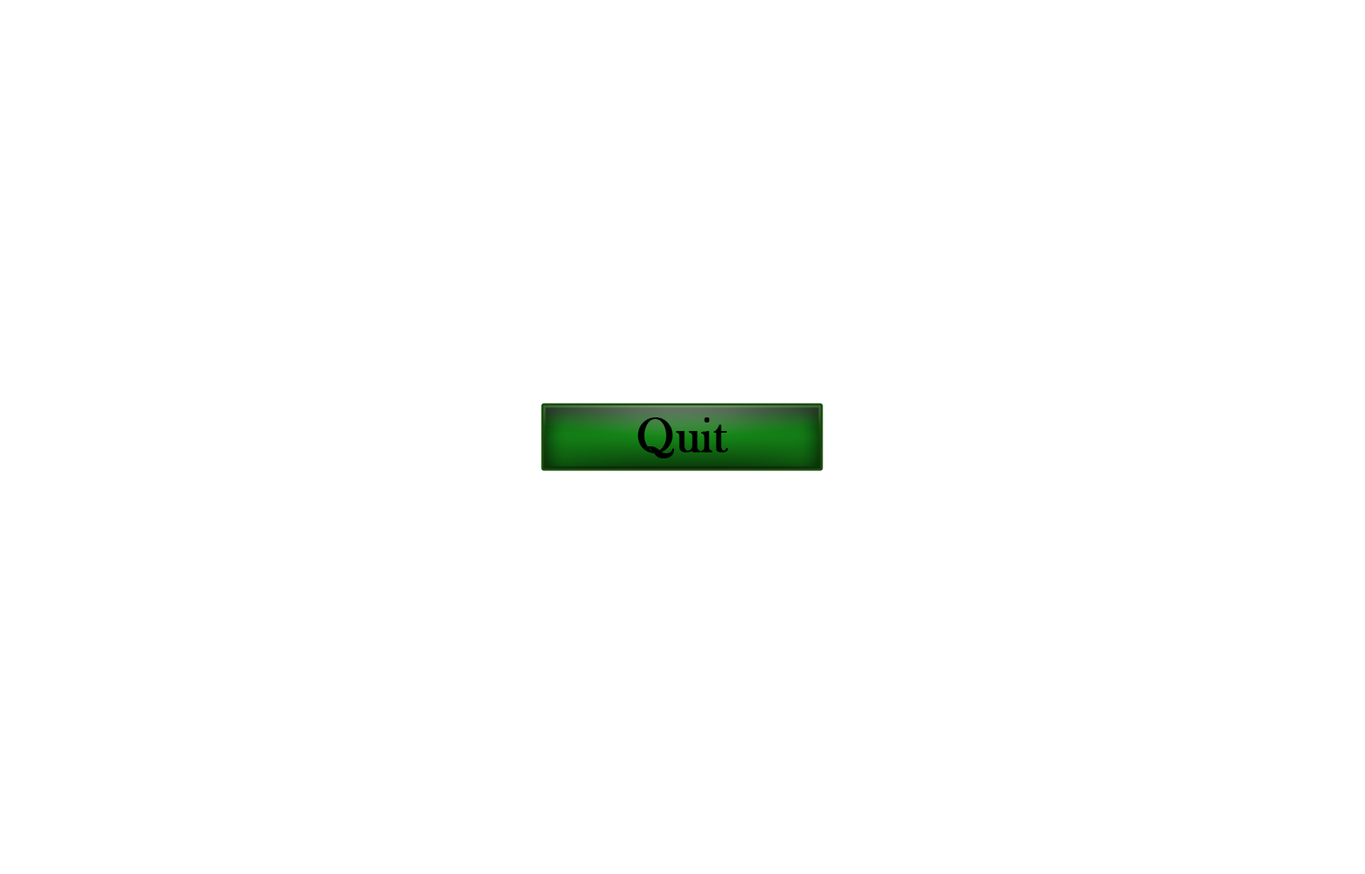
<style>
.page{position:relative;width:1365px;height:874px;background:#ffffff}
.page>*{position:absolute;margin:0}
.t1{font:49.8px "BaskOldFace";color:#000000;font-weight:bold;scale:0.95 1}
</style>
<div class="page">
<p class="t1" style="left:637px;top:417px;width:92px;height:41px">Quit</p>
</div>
